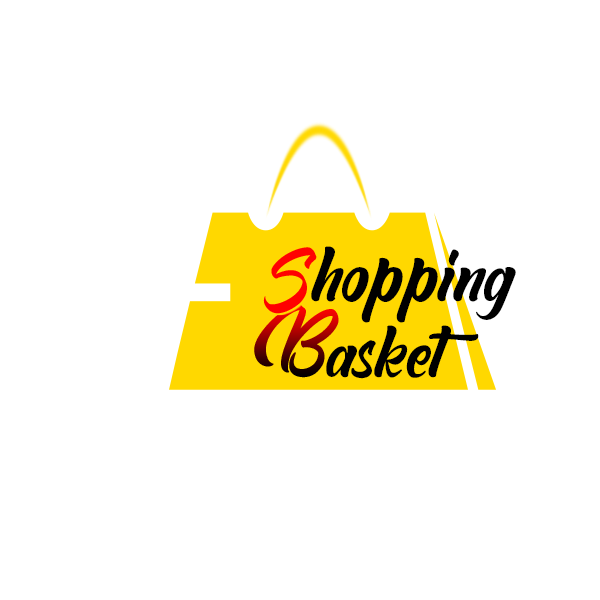
<style>
.page{position:relative;width:600px;height:600px;background:#ffffff}
.page>*{position:absolute;margin:0}
.t1{font:72px "AbeganshiRegular";color:#000000}
.t2{font:68px "AbeganshiRegular";color:#000000}
</style>
<div class="page">
<p class="t1" style="left:311px;top:246px;width:205px;height:77px">hopping</p>
<p class="t2" style="left:326px;top:325px;width:153px;height:54px">asket</p>
</div>
